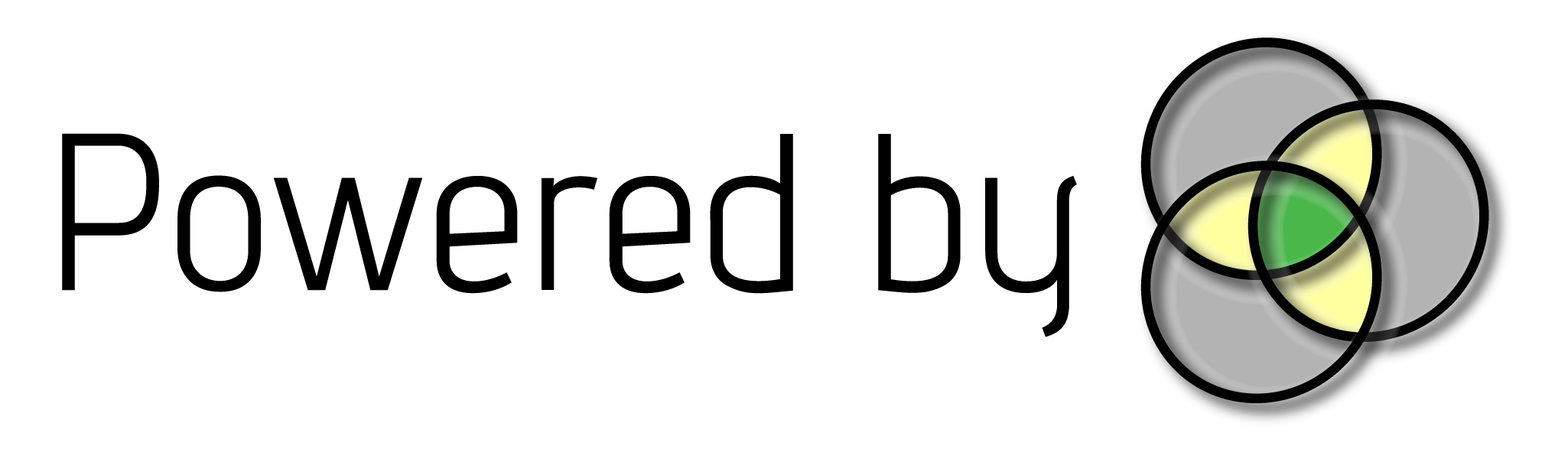
<style>
.page{position:relative;width:1568px;height:472px;background:#ffffff}
.page>*{position:absolute;margin:0}
.t1{font:223.1px "advent-Regular";color:#000000}
</style>
<div class="page">
<p class="t1" style="left:62px;top:133px;width:1015px;height:204px">Powered by</p>
</div>
